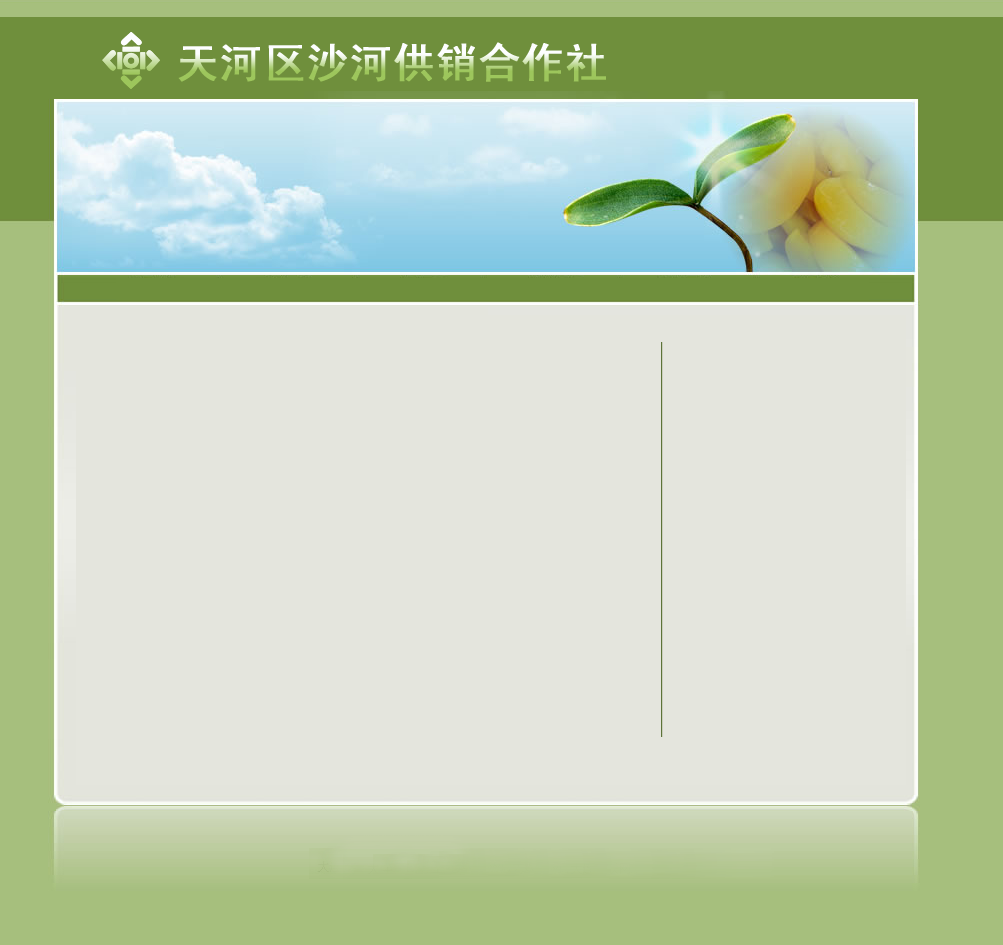
<style>
.page{position:relative;width:1003px;height:945px;background:#e4e5dd}
.page>*{position:absolute;margin:0}
.t1{font:42px "SimHei";font-weight:bold}
</style>
<div class="page">
<p class="t1" style="left:178px;top:42px;width:428px;height:40px">天河区沙河供销合作社</p>
</div>
